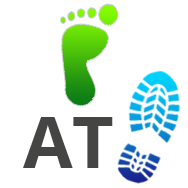
<style>
.page{position:relative;width:188px;height:188px;background:#ffffff}
.page>*{position:absolute;margin:0}
.t1{font:72px "OpenSans-Bold";color:#454644}
</style>
<div class="page">
<p class="t1" style="left:23px;top:117px;width:90px;height:51px">AT</p>
</div>
